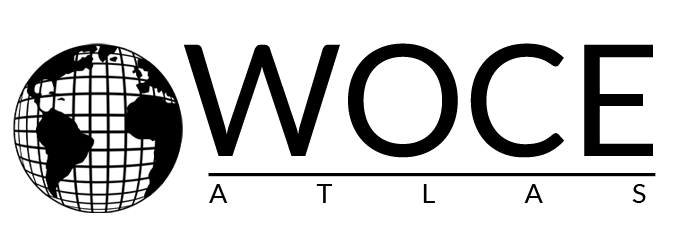
<style>
.page{position:relative;width:682px;height:252px;background:#ffffff}
.page>*{position:absolute;margin:0}
.t1{font:155.1px "Lato-Regular";color:#000000}
.t2{font:27px "Lato-Regular";letter-spacing:3.3em;color:#010000}
</style>
<div class="page">
<p class="t1" style="left:184px;top:43px;width:469px;height:115px">WOCE</p>
<p class="t2" style="left:209px;top:184px;width:437px;height:19px">ATLAS</p>
</div>
